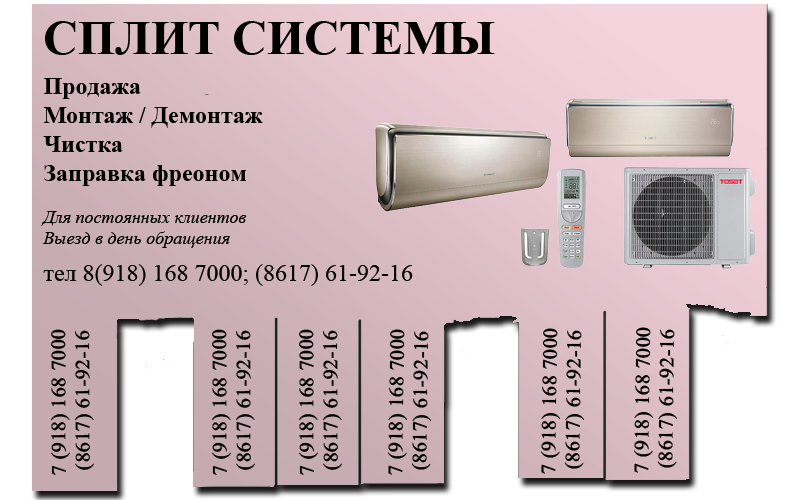
<style>
.page{position:relative;width:800px;height:500px}
.page>*{position:absolute;margin:0}
.t1{font:48px "TimesNewRomanPS-BoldMT";color:#000000}
.t2{font:24px "TimesNewRomanPS-BoldMT";color:#000000}
.t3{font:18px "TimesNewRomanPS-ItalicMT";color:#000000}
.t4{font:24px "TimesNewRomanPSMT";color:#000000}
.t5{font:20px "TimesNewRomanPSMT";color:#000000;font-weight:bold}
</style>
<div class="page">
<p class="t1" style="left:45px;top:21px;width:450px;height:34px">СПЛИТ СИСТЕМЫ</p>
<p class="t2" style="left:43px;top:78px;width:220px;height:108px">Продажа<br>Монтаж / Демонтаж<br>Чистка<br>Заправка фреоном</p>
<p class="t3" style="left:41px;top:211px;width:206px;height:37px">Для постоянных клиентов <br>Выезд в день обращения</p>
<p class="t4" style="left:43px;top:264px;width:370px;height:22px">тел 8(918) 168 7000; (8617) 61-92-16</p>
<p class="t5" style="left:51px;top:329px;width:43px;height:146px;rotate:-90deg">7 (918) 168 7000<br> (8617) 61-92-16</p>
<p class="t5" style="left:212px;top:329px;width:43px;height:146px;rotate:-90deg">7 (918) 168 7000<br> (8617) 61-92-16</p>
<p class="t5" style="left:299px;top:329px;width:43px;height:146px;rotate:-90deg">7 (918) 168 7000<br> (8617) 61-92-16</p>
<p class="t5" style="left:388px;top:329px;width:43px;height:146px;rotate:-89deg">7 (918) 168 7000<br> (8617) 61-92-16</p>
<p class="t5" style="left:541px;top:328px;width:43px;height:146px;rotate:-89deg">7 (918) 168 7000<br> (8617) 61-92-16</p>
<p class="t5" style="left:634px;top:327px;width:43px;height:146px;rotate:-89deg">7 (918) 168 7000<br> (8617) 61-92-16</p>
</div>
